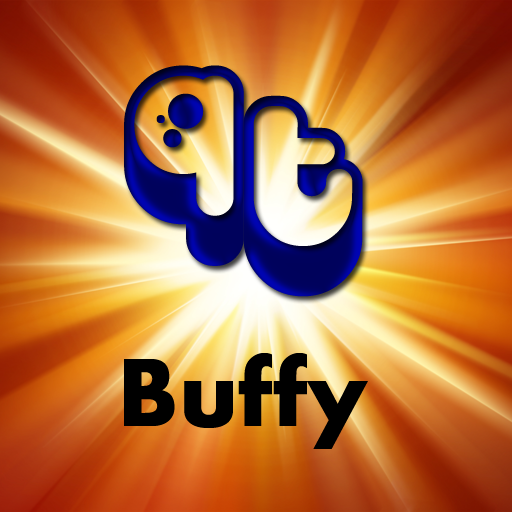
<style>
.page{position:relative;width:512px;height:512px}
.page>*{position:absolute;margin:0}
.t1{font:100px "Aharoni-Bold";color:#000000}
</style>
<div class="page">
<p class="t1" style="left:124px;top:353px;width:244px;height:96px">Buffy</p>
</div>
